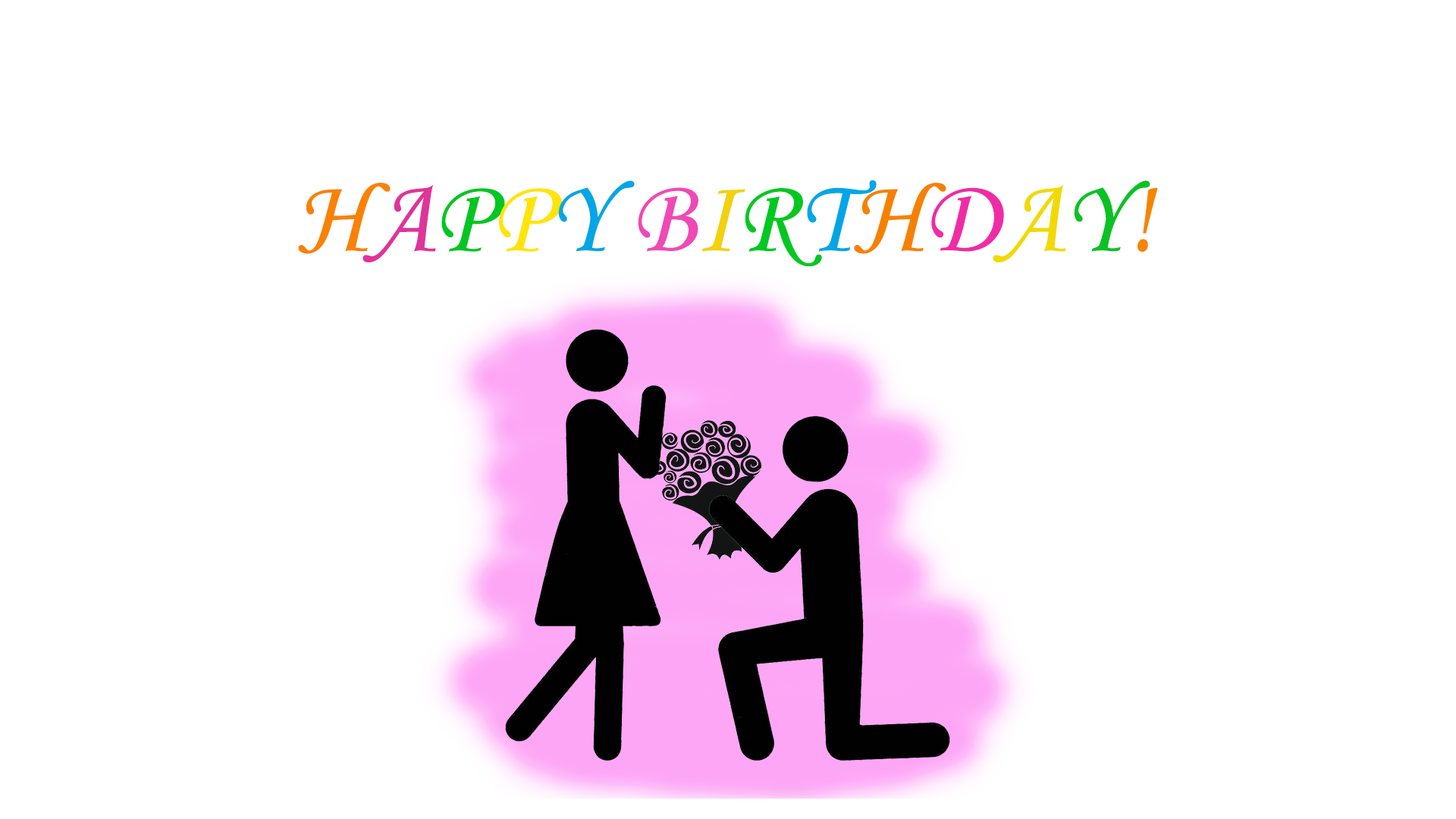
<style>
.page{position:relative;width:1456px;height:819px;background:#ffffff}
.page>*{position:absolute;margin:0}
.t1{font:106.1px "MonotypeCorsiva";color:#fa8103}
.t2{font:106.1px "MonotypeCorsiva";color:#df349a}
.t3{font:106.1px "MonotypeCorsiva";color:#02c622}
.t4{font:106.1px "MonotypeCorsiva";color:#ffe40a}
.t5{font:106.1px "MonotypeCorsiva";color:#03a6e4}
.t6{font:106.1px "MonotypeCorsiva";color:#ef49b5}
.t7{font:106.1px "MonotypeCorsiva";color:#f3d10b}
.t8{font:106.1px "MonotypeCorsiva";color:#00c821}
.t9{font:106.1px "MonotypeCorsiva";color:#01a6e7}
.t10{font:106.1px "MonotypeCorsiva";color:#f68100}
.t11{font:106.1px "MonotypeCorsiva";color:#ef2ca5}
.t12{font:106.1px "MonotypeCorsiva";color:#f1da01}
.t13{font:106.1px "MonotypeCorsiva";color:#0ac224}
.t14{font:106.1px "MonotypeCorsiva";color:#f68400}
</style>
<div class="page">
<p class="t1" style="left:298px;top:180px;width:860px;height:87px">H<span class="t2">A</span><span class="t3">P</span><span class="t4">P</span><span class="t5">Y </span><span class="t6">B</span><span class="t7">I</span><span class="t8">R</span><span class="t9">T</span><span class="t10">H</span><span class="t11">D</span><span class="t12">A</span><span class="t13">Y</span><span class="t14">!</span></p>
</div>
